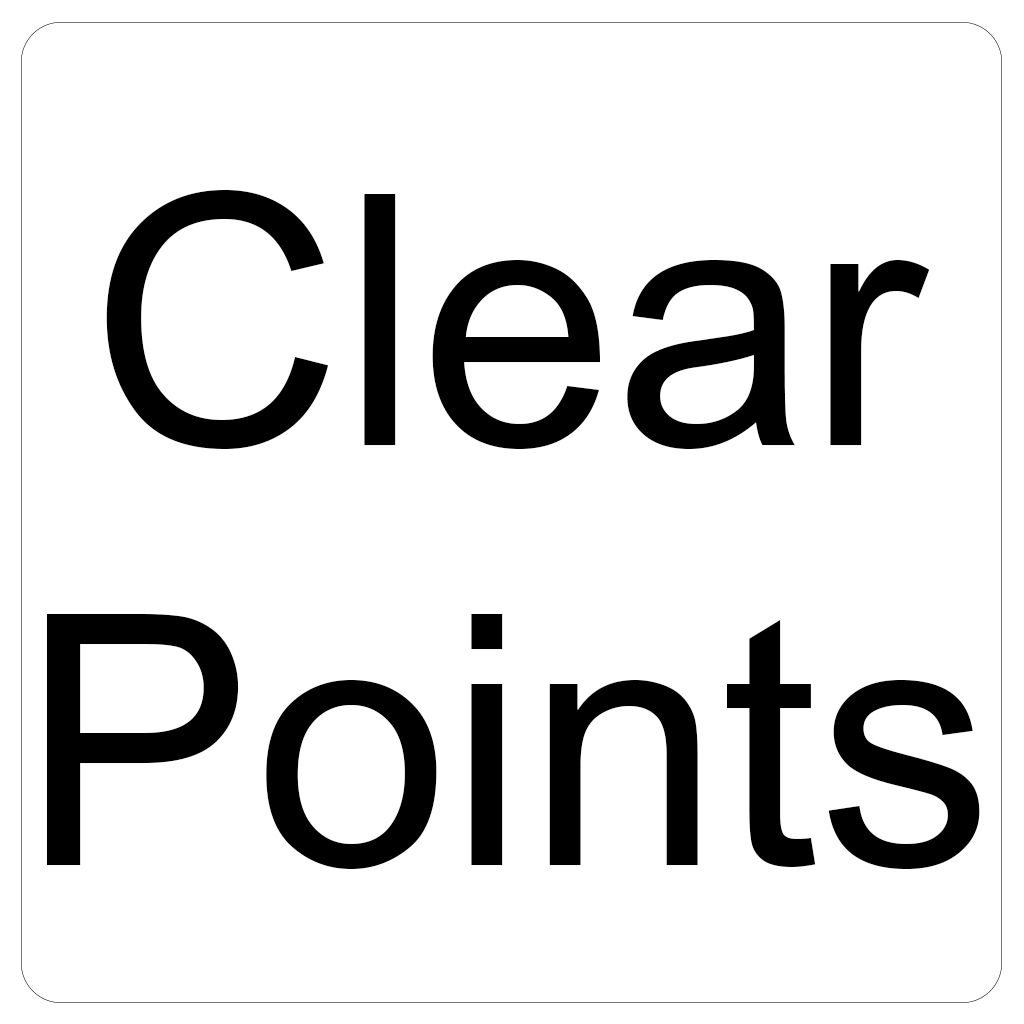
<style>
.page{position:relative;width:1024px;height:1024px;background:#ffffff}
.page>*{position:absolute;margin:0}
.t1{font:350px "ArialUnicodeMS";color:#000000}
</style>
<div class="page">
<p class="t1" style="left:46px;top:190px;width:934px;height:679px;text-align:center">Clear<br>Points</p>
</div>
